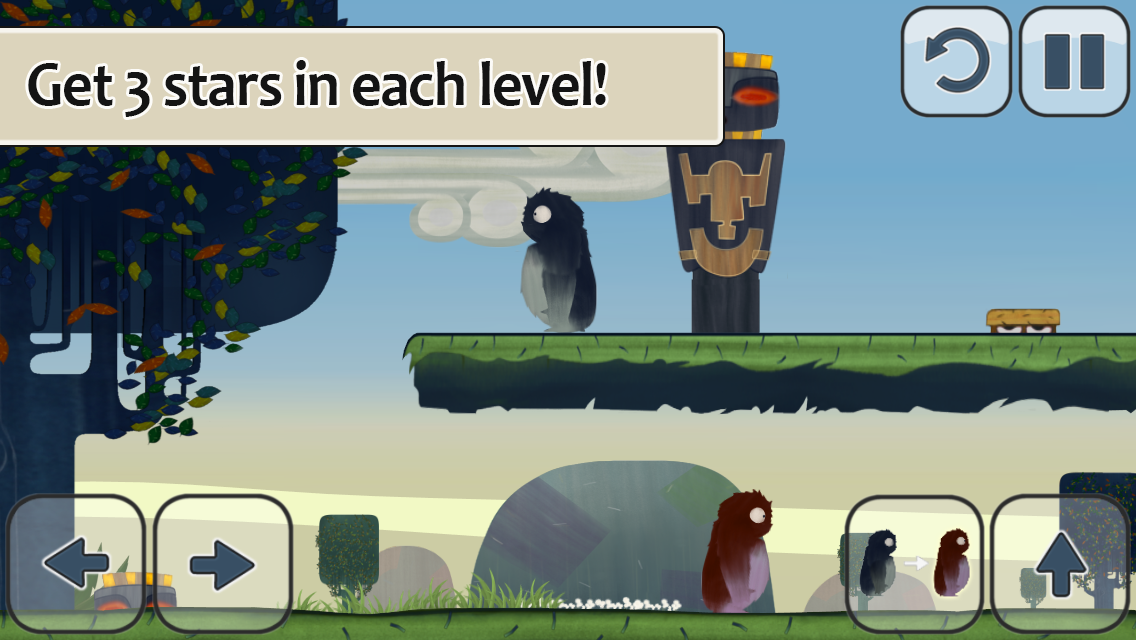
<style>
.page{position:relative;width:1136px;height:640px}
.page>*{position:absolute;margin:0}
.t1{font:63.6px "Candara-Bold";letter-spacing:-0.02em;color:#141414;scale:0.94 1}
</style>
<div class="page">
<p class="t1" style="left:28px;top:60px;width:578px;height:57px">Get 3 stars in each level!</p>
</div>
